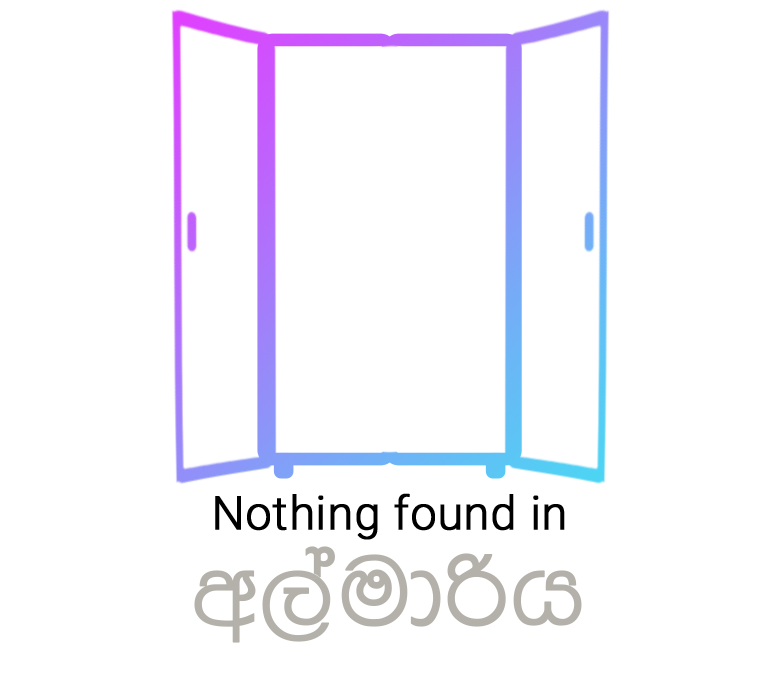
<style>
.page{position:relative;width:780px;height:688px;background:#ffffff}
.page>*{position:absolute;margin:0}
.t1{font:46.4px "Roboto-Light";color:#000000;font-weight:bold}
.t2{font:106.4px "4u-Milith-";color:#b4b1ab;font-weight:bold}
</style>
<div class="page">
<p class="t1" style="left:215px;top:493px;width:350px;height:47px">Nothing found in</p>
<p class="t2" style="left:194px;top:546px;width:388px;height:97px">w,audßh</p>
</div>
